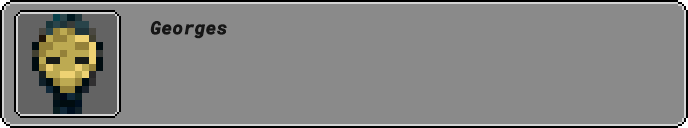
<style>
.page{position:relative;width:688px;height:128px;background:#8a8a8a}
.page>*{position:absolute;margin:0}
.t1{font:18px "RobotoMono-BoldItalic";color:#161616;font-weight:bold}
</style>
<div class="page">
<p class="t1" style="left:150px;top:21px;width:77px;height:18px">Georges</p>
</div>
